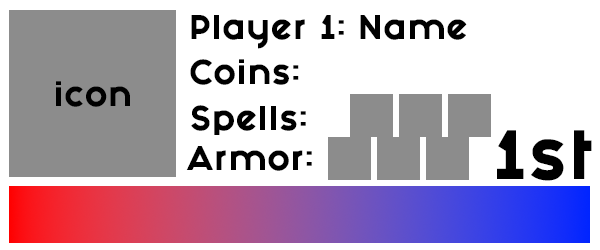
<style>
.page{position:relative;width:600px;height:250px;background:#ffffff}
.page>*{position:absolute;margin:0}
.t1{font:29px "FashionFetishHeavy";color:#000000}
.t2{font:59px "FashionFetishHeavy";color:#000000}
</style>
<div class="page">
<p class="t1" style="left:191px;top:15px;width:276px;height:34px">Player 1: Name</p>
<p class="t1" style="left:190px;top:59px;width:109px;height:26px">Coins:</p>
<p class="t1" style="left:56px;top:81px;width:74px;height:26px">icon</p>
<p class="t1" style="left:191px;top:105px;width:115px;height:30px">Spells:</p>
<p class="t2" style="left:497px;top:130px;width:95px;height:51px">1st</p>
<p class="t1" style="left:186px;top:146px;width:126px;height:25px">Armor:</p>
</div>
